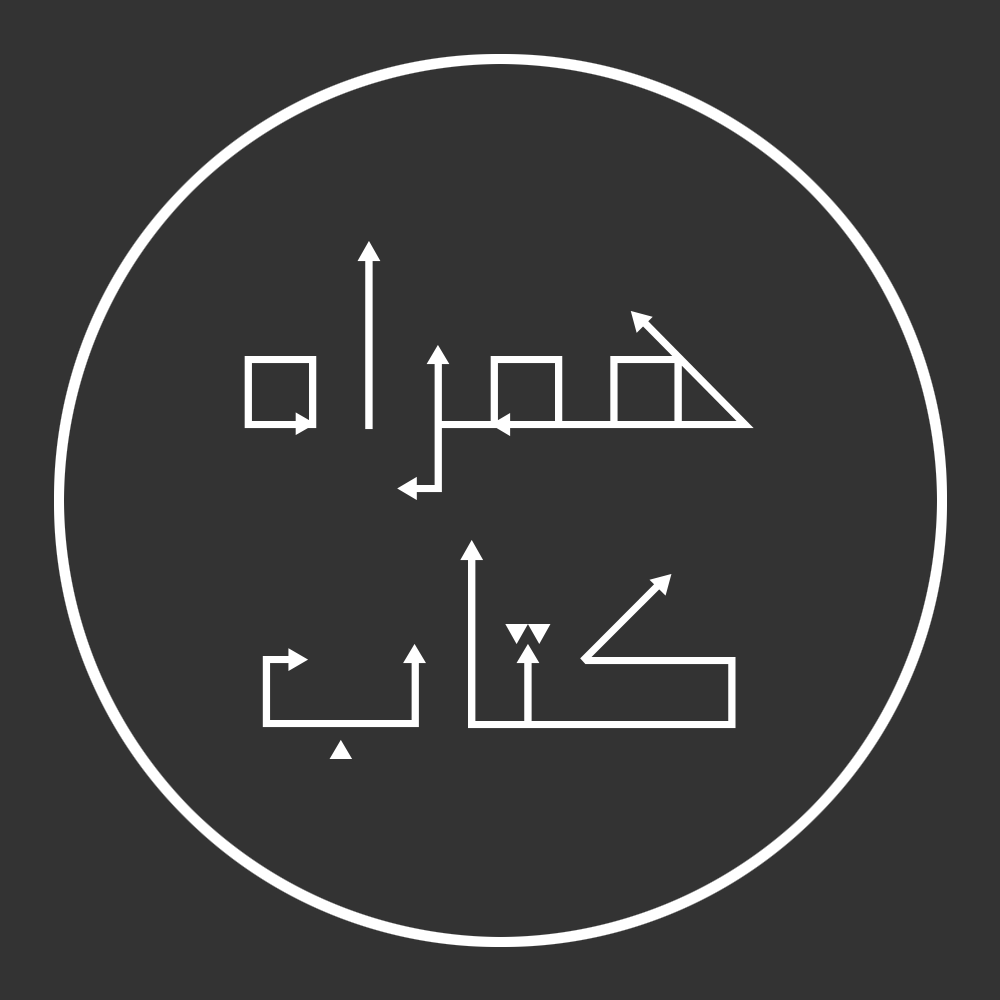
<style>
.page{position:relative;width:1000px;height:1000px;background:#333333}
.page>*{position:absolute;margin:0}
.t1{font:250px "BTir";color:#ffffff}
</style>
<div class="page">
<p class="t1" style="left:244px;top:241px;width:510px;height:518px;text-align:center">همراه<br>کتاب</p>
</div>
